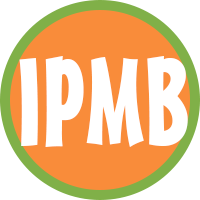
<style>
.page{position:relative;width:200px;height:200px;background:#ffffff}
.page>*{position:absolute;margin:0}
.t1{font:120px "MisterEarlBT-Regular";color:#ffffff}
</style>
<div class="page">
<p class="t1" style="left:19px;top:56px;width:169px;height:91px">IPMB</p>
</div>
